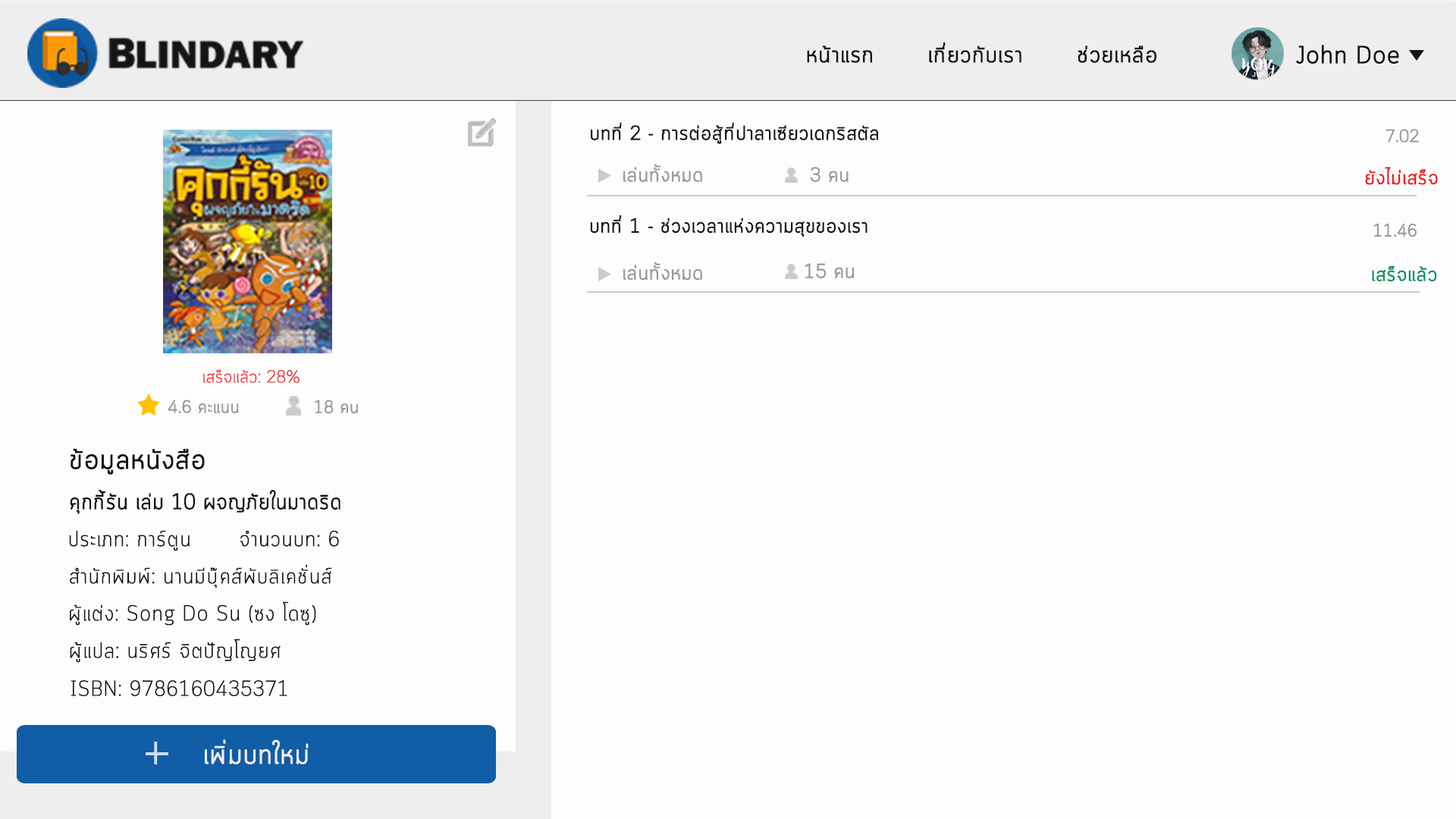
<style>
.page{position:relative;width:1456px;height:819px;background:#fdfdfd}
.page>*{position:absolute;margin:0}
.t1{font:22.7px "Cloud-Light";color:#141414;font-weight:bold}
.t2{font:24.2px "Cloud-Light";color:#141414;font-weight:bold}
.t3{font:19.7px "Cloud-Light";color:#141414;font-weight:bold}
.t4{font:17.4px "Cloud-Light";color:#999999;font-weight:bold}
.t5{font:19.7px "Cloud-Light";color:#999999;font-weight:bold}
.t6{font:19.7px "Cloud-Light";color:#ed1c24;font-weight:bold}
.t7{font:19.7px "Cloud-Light";color:#00925b;font-weight:bold}
.t8{font:17.6px "Cloud-Light";color:#ed1c24}
.t9{font:17.6px "Cloud-Light";color:#999999;font-weight:bold}
.t10{font:27.4px "Cloud-Light";color:#141414;font-weight:bold}
.t11{font:22px "Cloud-Light";color:#141414;font-weight:bold;scale:0.95 1}
.t12{font:27.3px "Cloud-Light";color:#efefef;font-weight:bold}
</style>
<div class="page">
<p class="t1" style="left:807px;top:42px;width:349px;height:21px">หน้าแรก       เกี่ยวกับเรา       ช่วยเหลือ</p>
<p class="t2" style="left:1296px;top:45px;width:103px;height:19px">John Doe</p>
<p class="t3" style="left:591px;top:122px;width:287px;height:22px">บทที่ 2 - การต่อสู้ที่ปาลาเซียวเดกริสตัล</p>
<p class="t4" style="left:1385px;top:129px;width:34px;height:14px">7.02</p>
<p class="t5" style="left:623px;top:164px;width:79px;height:18px">เล่นทั้งหมด</p>
<p class="t5" style="left:810px;top:167px;width:39px;height:15px">3 คน</p>
<p class="t6" style="left:1365px;top:167px;width:73px;height:18px">ยังไม่เสร็จ</p>
<p class="t3" style="left:590px;top:215px;width:278px;height:22px">บทที่ 1 - ช่วงเวลาแห่งความสุขของเรา</p>
<p class="t4" style="left:1373px;top:223px;width:44px;height:14px">11.46</p>
<p class="t5" style="left:623px;top:262px;width:79px;height:19px">เล่นทั้งหมด</p>
<p class="t5" style="left:805px;top:263px;width:50px;height:15px">15 คน</p>
<p class="t7" style="left:1372px;top:265px;width:65px;height:16px">เสร็จแล้ว</p>
<p class="t8" style="left:203px;top:369px;width:97px;height:14px">เสร็จแล้ว: 28%</p>
<p class="t9" style="left:168px;top:400px;width:71px;height:13px">4.6 คะแนน</p>
<p class="t9" style="left:315px;top:400px;width:43px;height:13px">18 คน</p>
<p class="t10" style="left:71px;top:448px;width:134px;height:27px">ข้อมูลหนังสือ</p>
<p class="t11" style="left:70px;top:490px;width:270px;height:24px">คุกกี้รัน เล่ม 10 ผจญภัยในมาดริด</p>
<p class="t11" style="left:69px;top:530px;width:121px;height:21px">ประเภท: การ์ตูน</p>
<p class="t11" style="left:240px;top:530px;width:99px;height:17px">จำนวนบท: 6</p>
<p class="t11" style="left:70px;top:564px;width:262px;height:24px">สำนักพิมพ์: นานมีบุ๊คส์พับลิเคชั่นส์</p>
<p class="t11" style="left:70px;top:601px;width:246px;height:25px">ผู้แต่ง: Song Do Su (ซง โดซู)</p>
<p class="t11" style="left:70px;top:639px;width:211px;height:24px">ผู้แปล: นริศร์ จิตปัญโญยศ</p>
<p class="t11" style="left:71px;top:680px;width:216px;height:16px">ISBN: 9786160435371</p>
<p class="t12" style="left:205px;top:739px;width:104px;height:25px">เพิ่มบทใหม่</p>
</div>
